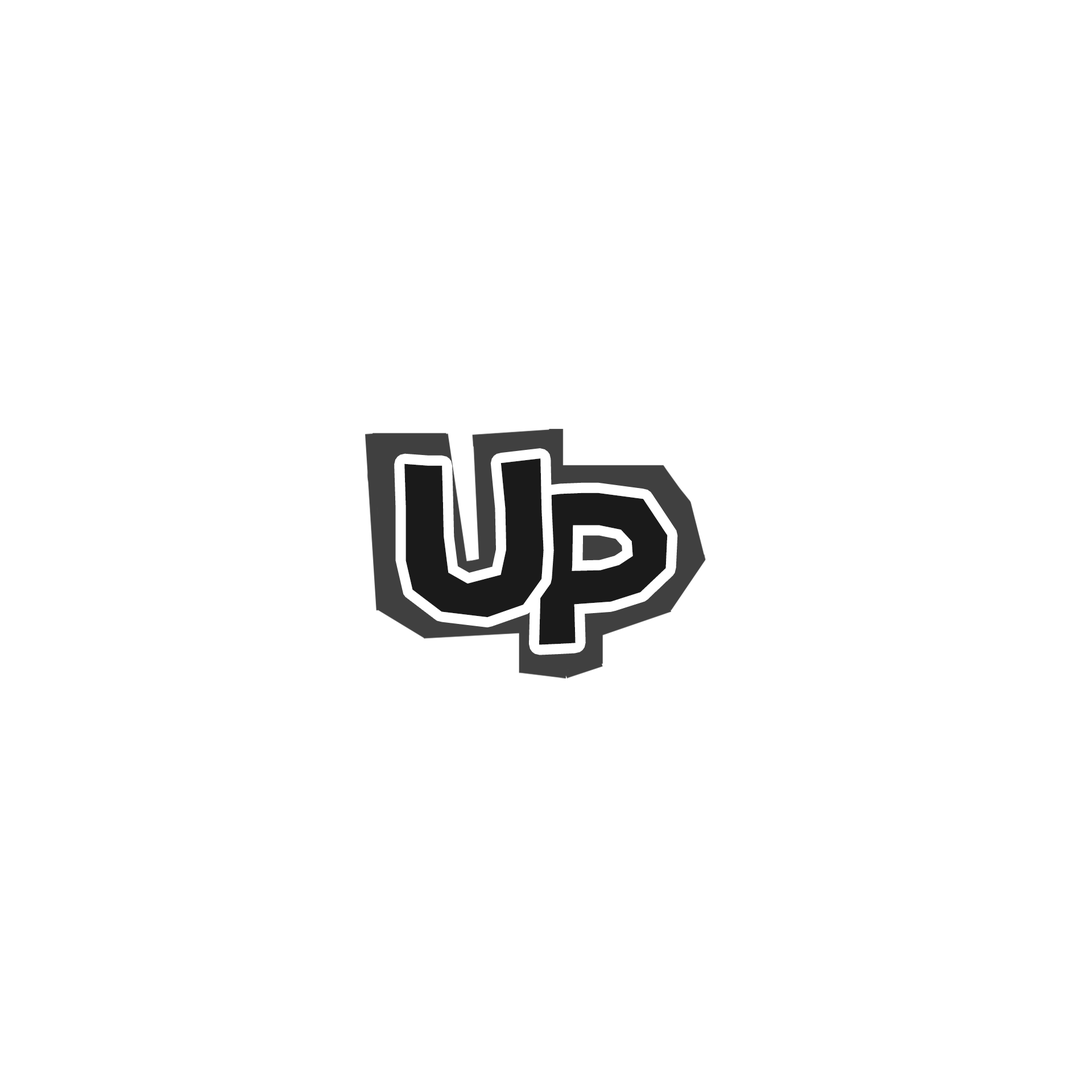
<style>
.page{position:relative;width:1092px;height:1092px;background:#ffffff}
.page>*{position:absolute;margin:0}
.t1{font:224px "MaokenAssortedSans-Lite";letter-spacing:0.059em;color:#1a1a1a}
</style>
<div class="page">
<p class="t1" style="left:404px;top:458px;width:140px;height:160px">U</p>
<p class="t1" style="left:538px;top:493px;width:130px;height:152px">P</p>
</div>
